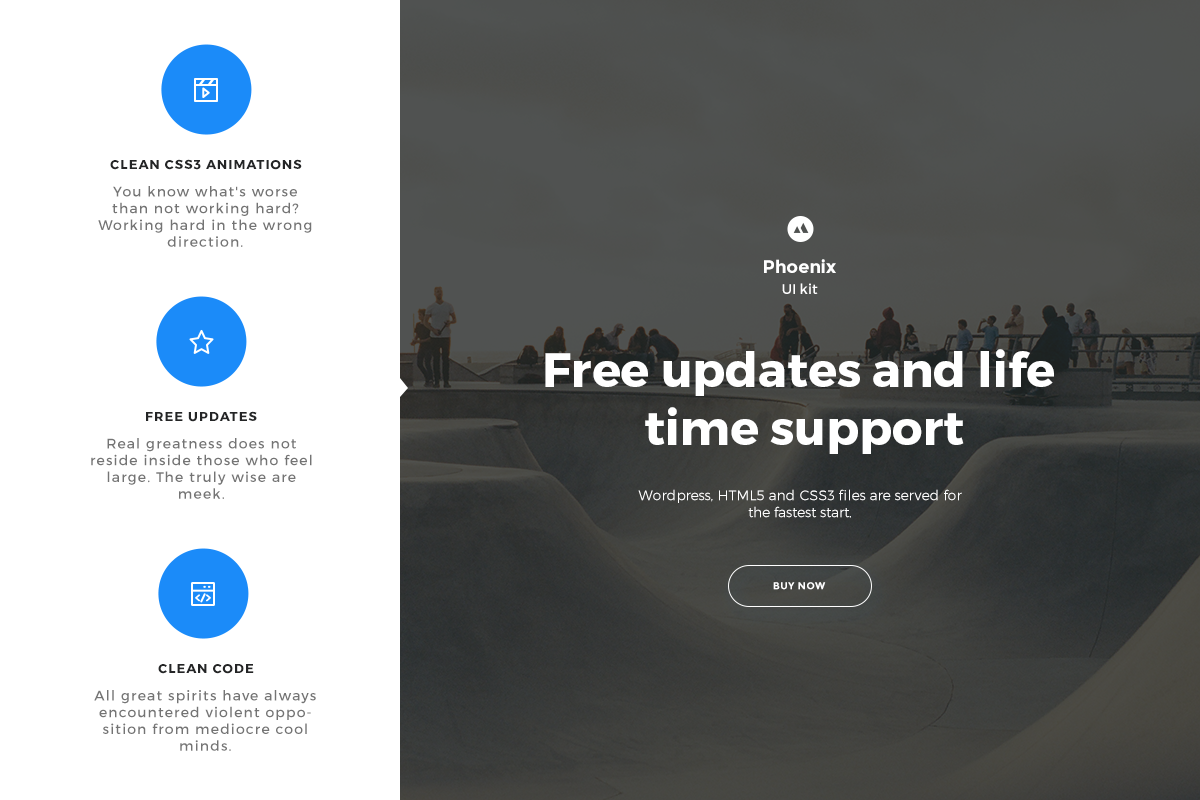
<style>
.page{position:relative;width:1200px;height:800px;background:#ffffff}
.page>*{position:absolute;margin:0}
.t1{font:13px "Montserrat-Bold";letter-spacing:0.08em;color:#242526;text-transform:uppercase}
.t2{font:14px "Montserrat-Regular";letter-spacing:0.08em;color:#747474}
.t3{font:18px "Montserrat-Bold";color:#ffffff}
.t4{font:14px "Montserrat-Regular";color:#ffffff}
.t5{font:48px "Montserrat-Bold";color:#ffffff}
.t6{font:14px "Montserrat-Light";color:#ffffff}
.t7{font:10px "Montserrat-Bold";letter-spacing:0.04em;color:#ffffff;text-transform:uppercase}
</style>
<div class="page">
<p class="t1" style="left:110px;top:159px;width:192px;height:11px">Clean css3 animations</p>
<p class="t2" style="left:98px;top:186px;width:214px;height:61px;text-align:center">You know what's worse than not working hard? Working hard in the wrong direction.<br>Think crazily, even if others laugh at you. Always act bravely, even if you are all alone.</p>
<p class="t3" style="left:764px;top:259px;width:72px;height:14px">Phoenix</p>
<p class="t4" style="left:782px;top:283px;width:36px;height:11px">UI kit</p>
<p class="t5" style="left:545px;top:349px;width:509px;height:105px;text-align:center">Free updates and life <br>time support</p>
<p class="t1" style="left:146px;top:411px;width:111px;height:11px">free updates</p>
<p class="t2" style="left:91px;top:438px;width:221px;height:61px;text-align:center">Real greatness does not reside inside those who feel large. The truly wise are meek.<br>When our little bit is combined with His good greatness, the all team is truly unbeatable.</p>
<p class="t6" style="left:638px;top:489px;width:324px;height:29px;text-align:center">Wordpress, HTML5 and CSS3 files are served for the fastest start.</p>
<p class="t7" style="left:773px;top:582px;width:53px;height:8px">buy now</p>
<p class="t1" style="left:158px;top:664px;width:96px;height:10px">Clean code</p>
<p class="t2" style="left:94px;top:690px;width:222px;height:61px;text-align:center">All great spirits have always encountered violent opposition from mediocre cool minds.<br>Always be a first rate version of yourself and not a second rate version of someone else.</p>
</div>
